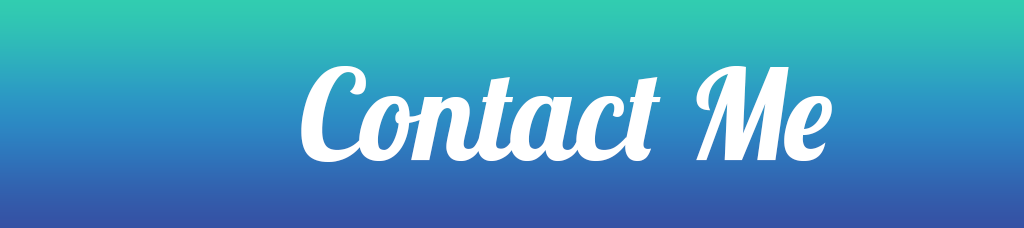
<style>
.page{position:relative;width:1024px;height:228px}
.page>*{position:absolute;margin:0}
.t1{font:125px "Lobster-Regular";color:#ffffff}
</style>
<div class="page">
<p class="t1" style="left:301px;top:66px;width:531px;height:96px">Contact Me</p>
</div>
